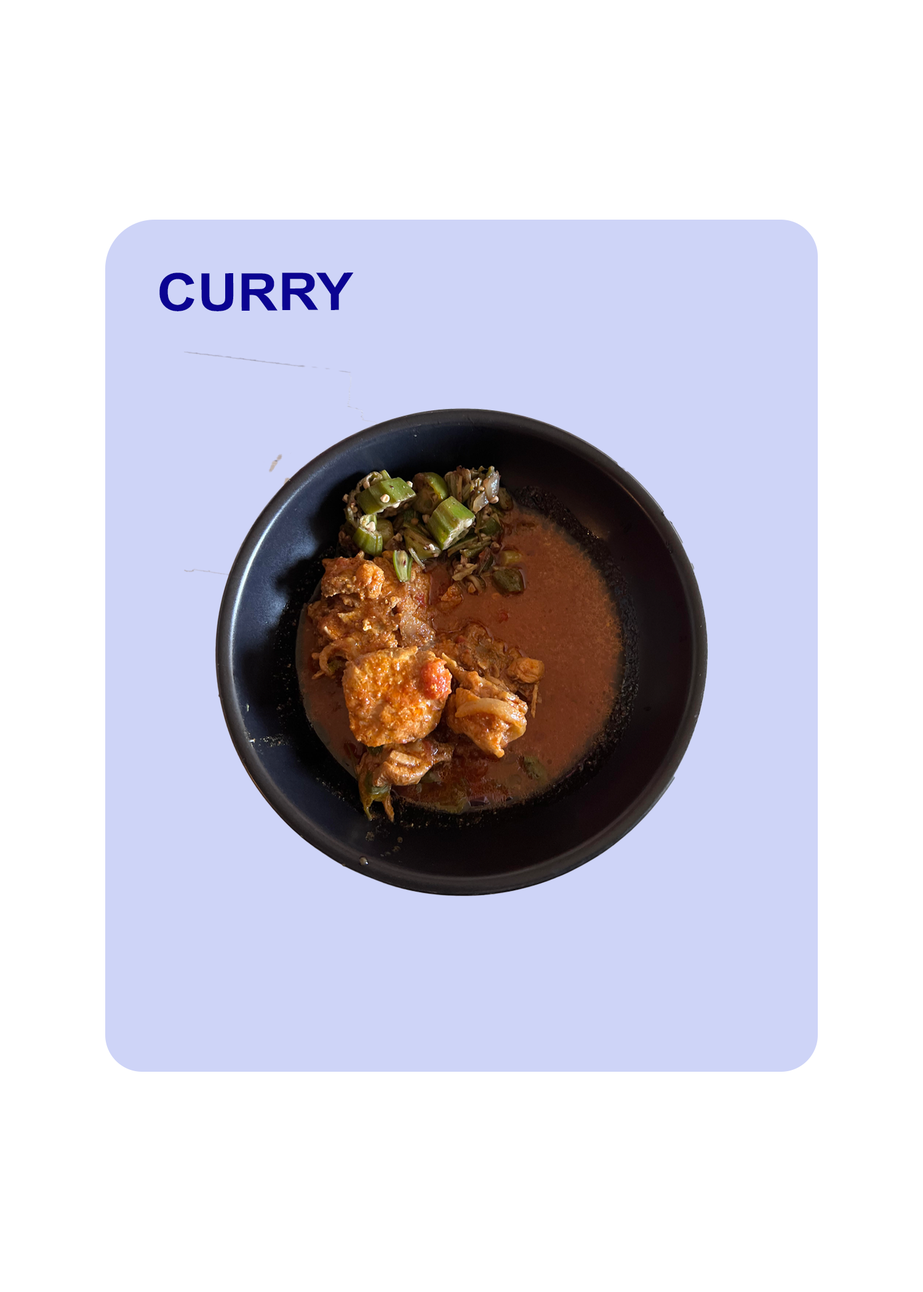
<style>
.page{position:relative;width:923px;height:1292px;background:#ffffff}
.page>*{position:absolute;margin:0}
.t1{font:52.2px "Arial-BoldMT";color:#0b0492;scale:1.07 1}
</style>
<div class="page">
<p class="t1" style="left:159px;top:273px;width:195px;height:38px">CURRY</p>
</div>
